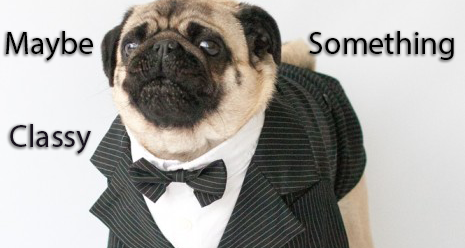
<style>
.page{position:relative;width:465px;height:248px}
.page>*{position:absolute;margin:0}
.t1{font:32px "MyriadPro-Regular";color:#000000}
.t2{font:32px "MyriadPro-Regular";color:#18121e}
</style>
<div class="page">
<p class="t1" style="left:6px;top:31px;width:87px;height:30px">Maybe</p>
<p class="t1" style="left:309px;top:31px;width:145px;height:29px">Something</p>
<p class="t2" style="left:10px;top:124px;width:81px;height:30px">Classy</p>
</div>
